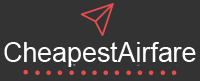
<style>
.page{position:relative;width:200px;height:81px;background:#333333}
.page>*{position:absolute;margin:0}
.t1{font:26.9px "ArialMT";color:#ffffff}
</style>
<div class="page">
<p class="t1" style="left:4px;top:42px;width:192px;height:25px">CheapestAirfare</p>
</div>
